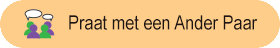
<style>
.page{position:relative;width:280px;height:48px;background:#fecd8a}
.page>*{position:absolute;margin:0}
.t1{font:19.9px "ArialNarrow";color:#1d1413}
</style>
<div class="page">
<p class="t1" style="left:69px;top:15px;width:189px;height:15px">Praat met een Ander Paar</p>
</div>
